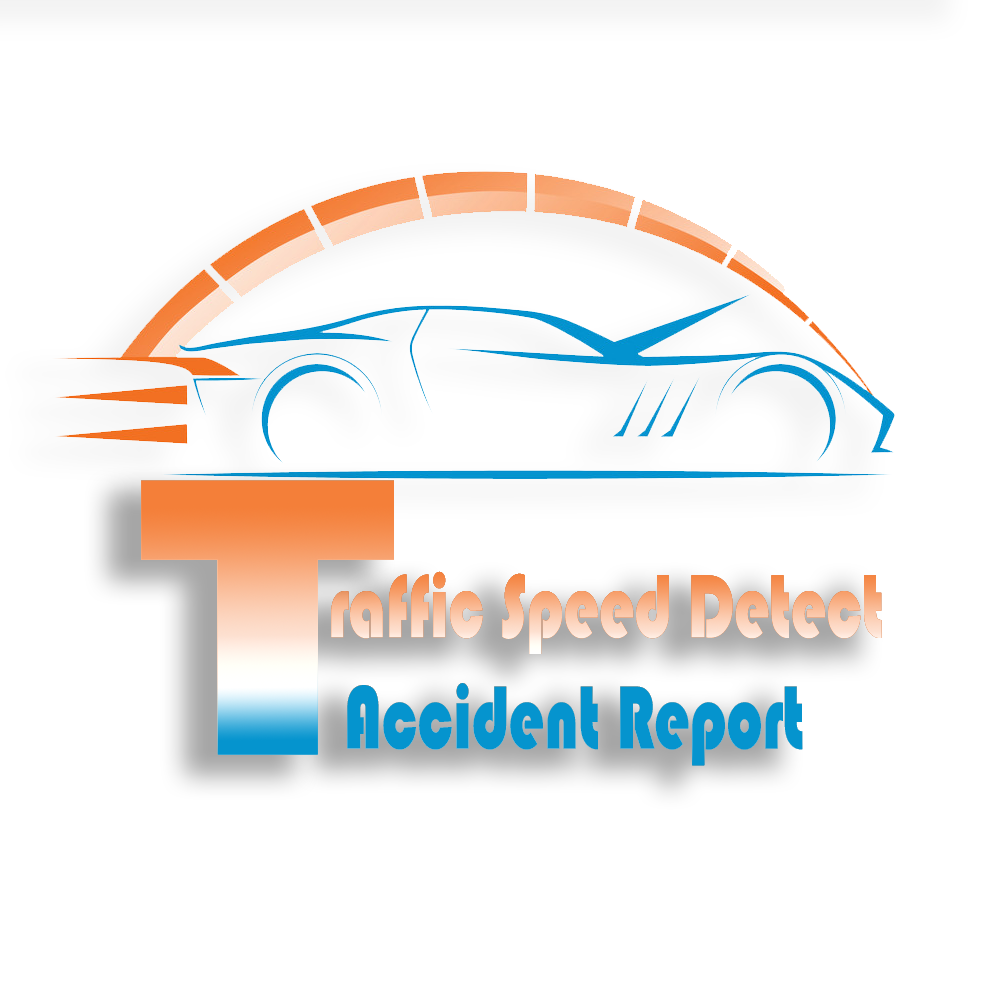
<style>
.page{position:relative;width:1000px;height:1002px;background:#ffffff}
.page>*{position:absolute;margin:0}
.t1{font:410.4px "Bauhaus93";scale:1.23 1}
.t2{font:92.7px "Bauhaus93";scale:0.69 1}
</style>
<div class="page">
<p class="t1" style="left:141px;top:480px;width:253px;height:275px">T</p>
<p class="t2" style="left:331px;top:571px;width:551px;height:195px;text-align:right">raffic Speed Detect <br> Accident Report</p>
</div>
